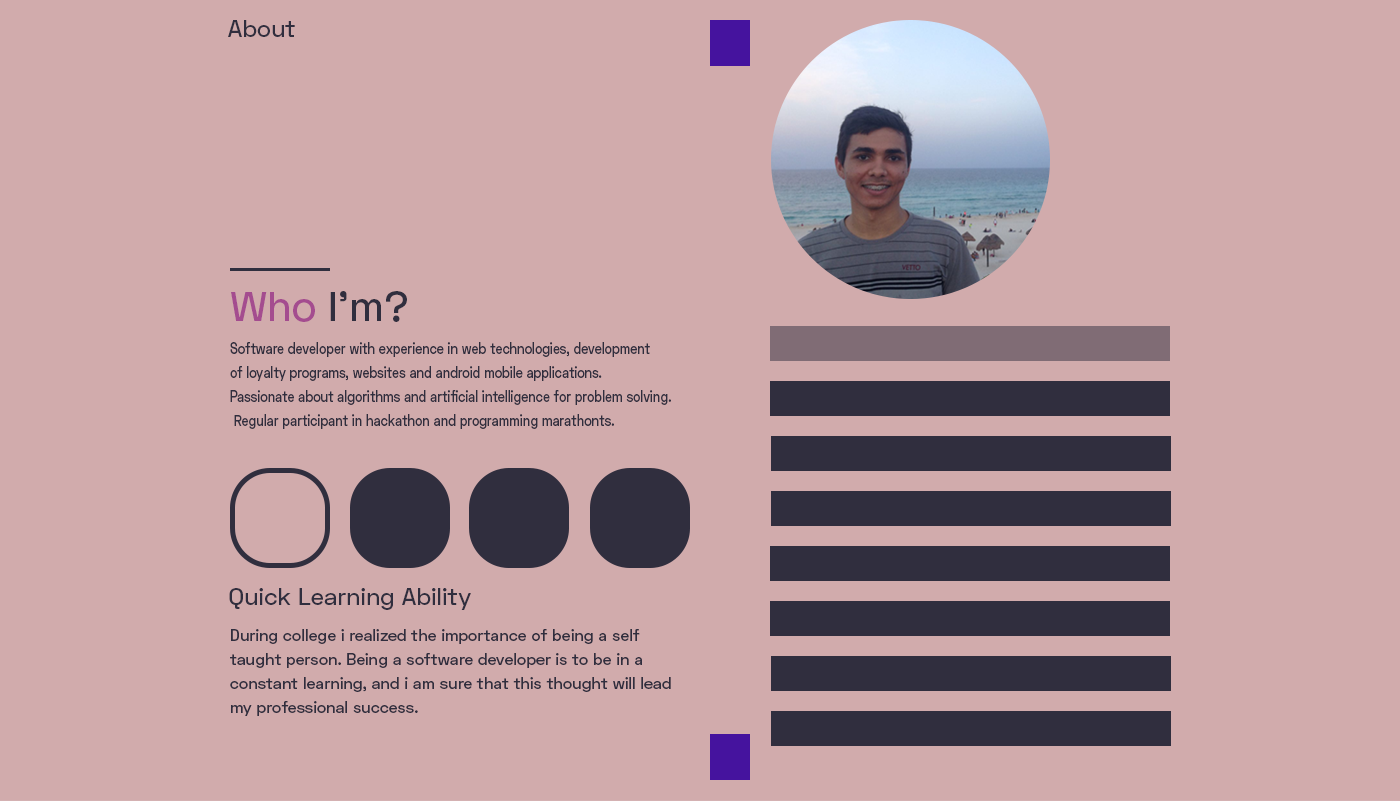
<style>
.page{position:relative;width:1400px;height:801px;background:#d1abac}
.page>*{position:absolute;margin:0}
.t1{font:24px "SpaceGrotesk-Medium";color:#302e3e}
.t2{font:42px "SpaceGrotesk-Medium";color:#302e3e}
.t3{font:42px "SpaceGrotesk-Medium";color:#a44c8f}
.t4{font:16px/24px "SpaceGrotesk-Medium";color:#302e3e;scale:0.79 1}
.t5{font:16px/24px "SpaceGrotesk-Medium";color:#302e3e}
</style>
<div class="page">
<p class="t1" style="left:228px;top:20px;width:67px;height:17px">About</p>
<p class="t2" style="left:231px;top:291px;width:176px;height:31px"><span class="t3">Who</span> I’m?</p>
<p class="t4" style="left:230px;top:342px;width:441px;height:87px">Software developer with experience in web technologies, development <br>of loyalty programs, websites and android mobile applications. <br>Passionate about algorithms and artificial intelligence for problem solving.<br> Regular participant in hackathon and programming marathonts.</p>
<p class="t1" style="left:229px;top:588px;width:242px;height:22px">Quick Learning Ability</p>
<p class="t5" style="left:230px;top:629px;width:441px;height:87px">During college i realized the importance of being a self taught person. Being a software developer is to be in a constant learning, and i am sure that this thought will lead my professional success.</p>
</div>
